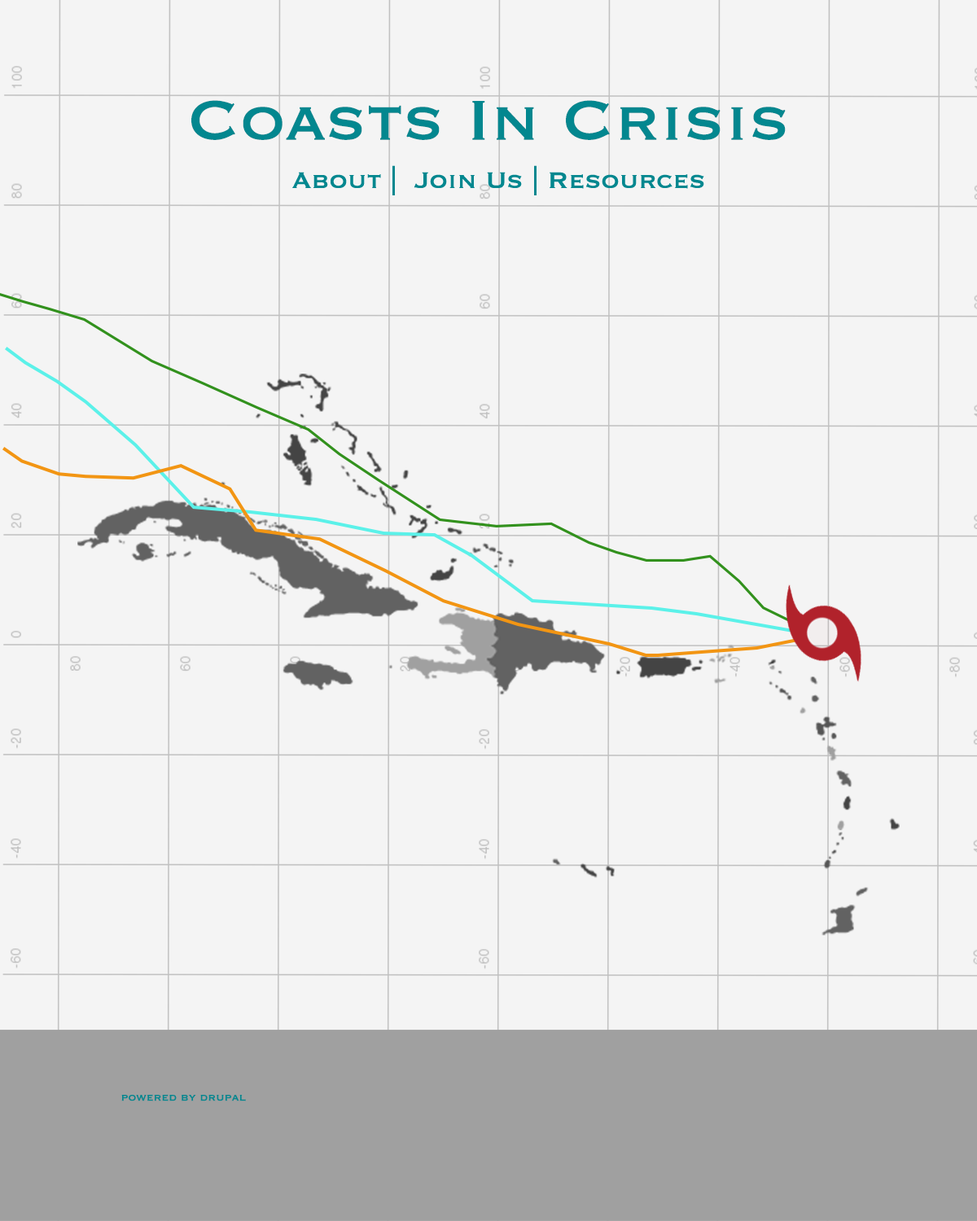
<style>
.page{position:relative;width:977px;height:1221px;background:#f4f4f4}
.page>*{position:absolute;margin:0}
.t1{font:73.3px "Copperplate";color:#03878f}
.t2{font:29.3px "Copperplate";color:#03878f}
.t3{font:13px "Copperplate";color:#03878f}
</style>
<div class="page">
<p class="t1" style="left:191px;top:100px;width:594px;height:40px">Coasts In Crisis</p>
<p class="t2" style="left:292px;top:165px;width:412px;height:30px">About |  Join Us | Resources</p>
<p class="t3" style="left:121px;top:1094px;width:125px;height:7px">powered by drupal</p>
</div>
